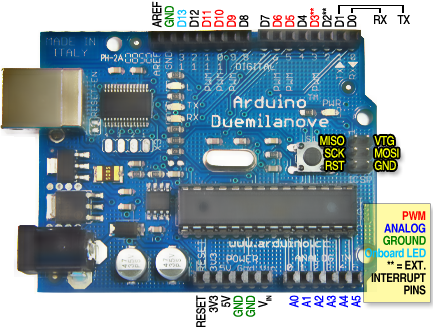
<style>
.page{position:relative;width:433px;height:330px;background:#ffffff}
.page>*{position:absolute;margin:0}
.t1{font:12.3px/12.4px "Helvetica-Narrow";letter-spacing:-0.03em;color:#ff0000}
.t2{font:12.3px/12.4px "Helvetica-Narrow";letter-spacing:-0.03em;color:#000000}
.t3{font:12.3px/12.4px "Helvetica-Narrow";letter-spacing:-0.03em;color:#008000}
.t4{font:12.3px/12.4px "Helvetica-Narrow";letter-spacing:-0.03em;color:#00c0ff}
.t5{font:12.3px "Helvetica-Narrow";letter-spacing:-0.03em;color:#000000}
.t6{font:12.3px/12.4px "Helvetica-Narrow";letter-spacing:-0.03em;color:#f6ff00}
.t7{font:12.3px/12.4px "Helvetica-Narrow-Bold";letter-spacing:-0.03em;color:#00c0ff}
.t8{font:12.3px/12.4px "Helvetica-Narrow-Bold";letter-spacing:-0.03em;color:#ff0000}
.t9{font:12.3px/12.4px "Helvetica-Narrow-Bold";letter-spacing:-0.03em;color:#0000ff}
.t10{font:12.3px/12.4px "Helvetica-Narrow-Bold";letter-spacing:-0.03em;color:#008000}
.t11{font:12.3px/12.4px "Helvetica-Narrow-Bold";letter-spacing:-0.03em;color:#000000}
.t12{font:12.3px/12.4px "Helvetica-Narrow";letter-spacing:-0.03em;color:#0000ff}
</style>
<div class="page">
<p class="t1" style="left:152px;top:1px;width:97px;height:27px;rotate:-90deg"><span class="t2">AREF<br></span><span class="t3">GND<br></span><span class="t4">D13<br></span><span class="t2">D12<br></span>D11<br>D10<br>D9<br><span class="t2">D8</span></p>
<p class="t2" style="left:260px;top:8px;width:97px;height:19px;rotate:-90deg">D7<br><span class="t1">D6<br>D5<br></span>D4<br><span class="t1">D3**<br></span>D2**<br>D1<br>D0</p>
<p class="t5" style="left:374px;top:15px;width:13px;height:9px">RX</p>
<p class="t5" style="left:397px;top:15px;width:13px;height:9px">TX</p>
<p class="t6" style="left:320px;top:135px;width:25px;height:36px;text-align:right">MISO<br>SCK<br>RST</p>
<p class="t6" style="left:374px;top:135px;width:25px;height:36px">VTG<br>MOSI<br>GND</p>
<p class="t7" style="left:365px;top:211px;width:61px;height:47px;text-align:right"><span class="t8">PWM<br></span><span class="t9">ANALOG<br></span><span class="t10">GROUND<br></span>Onboard LED</p>
<p class="t11" style="left:371px;top:260px;width:55px;height:35px;text-align:right">** = EXT.<br>INTERRUPT<br>PINS</p>
<p class="t2" style="left:196px;top:295px;width:76px;height:32px;text-align:right;rotate:-90deg">RESET<br>3V3<br>5V<br><span class="t3">GND<br>GND<br></span>VIN</p>
<p class="t12" style="left:289px;top:295px;width:72px;height:13px;text-align:right;rotate:-90deg">A0<br>A1<br>A2<br>A3<br>A4<br>A5</p>
</div>
